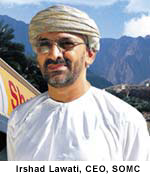
<style>
.page{position:relative;width:150px;height:177px}
.page>*{position:absolute;margin:0}
.t1{font:9px "Arial-BoldMT";letter-spacing:0.05em;color:#000000}
</style>
<div class="page">
<p class="t1" style="left:16px;top:165px;width:124px;height:9px">Irshad Lawati, CEO, SOMC</p>
</div>
